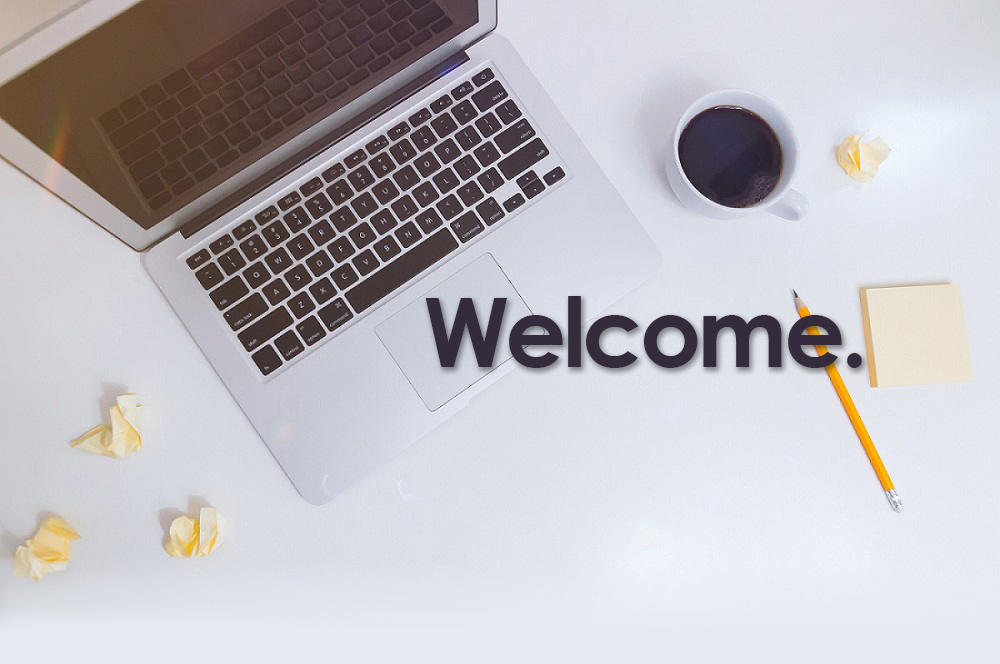
<style>
.page{position:relative;width:1000px;height:664px}
.page>*{position:absolute;margin:0}
.t1{font:96px "CenturyGothic-Bold";letter-spacing:-0.04em;color:#342b3c}
</style>
<div class="page">
<p class="t1" style="left:425px;top:296px;width:437px;height:72px">Welcome.</p>
</div>
